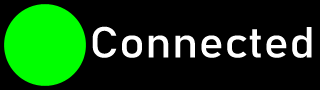
<style>
.page{position:relative;width:320px;height:90px;background:#000000}
.page>*{position:absolute;margin:0}
.t1{font:43.1px "Bahnschrift";color:#ffffff;scale:1.11 1}
</style>
<div class="page">
<p class="t1" style="left:92px;top:26px;width:220px;height:32px">Connected</p>
</div>
